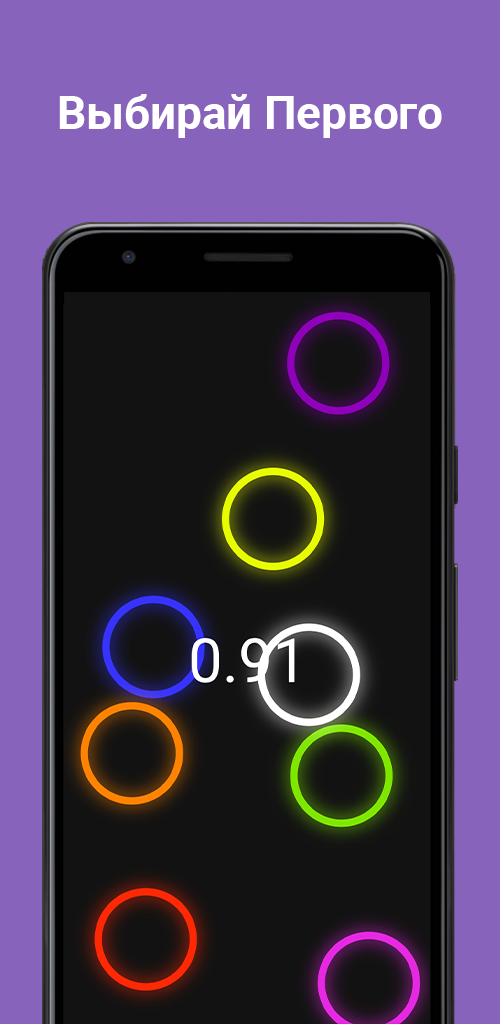
<style>
.page{position:relative;width:500px;height:1024px;background:#8863bb}
.page>*{position:absolute;margin:0}
.t1{font:45.8px "Roboto-Bold";color:#ffffff}
</style>
<div class="page">
<p class="t1" style="left:59px;top:94px;width:383px;height:44px">Выбирай Первого</p>
</div>
